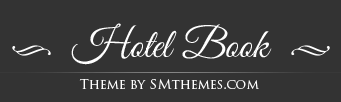
<style>
.page{position:relative;width:341px;height:102px;background:#333333}
.page>*{position:absolute;margin:0}
.t1{font:41.7px "GreatVibes-Regular";color:#ffffff}
.t2{font:13.3px "TrajanPro-Regular";color:#ffffff}
</style>
<div class="page">
<p class="t1" style="left:71px;top:23px;width:201px;height:42px">Hotel Book</p>
<p class="t2" style="left:79px;top:79px;width:180px;height:10px">Theme by SMthemes.com</p>
</div>
